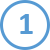
<style>
.page{position:relative;width:50px;height:50px;background:#ffffff}
.page>*{position:absolute;margin:0}
.t1{font:32px "Calibri-Bold";color:#569ad3}
</style>
<div class="page">
<p class="t1" style="left:20px;top:14px;width:13px;height:20px">1</p>
</div>
